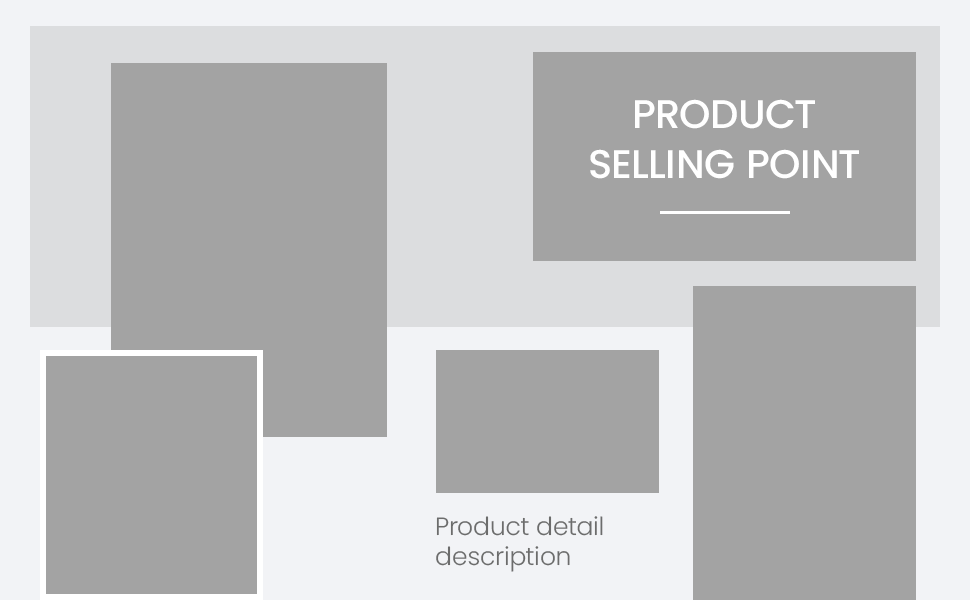
<style>
.page{position:relative;width:970px;height:600px;background:#a3a3a3}
.page>*{position:absolute;margin:0}
.t1{font:40px/50px "Poppins-Medium";color:#ffffff;text-transform:uppercase}
.t2{font:25px "Poppins-Light";color:#6c6c6c}
</style>
<div class="page">
<p class="t1" style="left:590px;top:99px;width:269px;height:80px;text-align:center">Product<br>selling point</p>
<p class="t2" style="left:436px;top:516px;width:167px;height:56px">Product detail<br>description</p>
</div>
